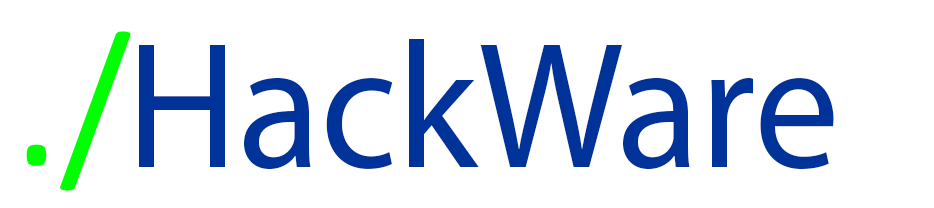
<style>
.page{position:relative;width:934px;height:208px;background:#ffffff}
.page>*{position:absolute;margin:0}
.t1{font:180.3px "MyriadPro-Regular";color:#003399;scale:0.95 1}
</style>
<div class="page">
<p class="t1" style="left:139px;top:39px;width:695px;height:131px">HackWare</p>
</div>
